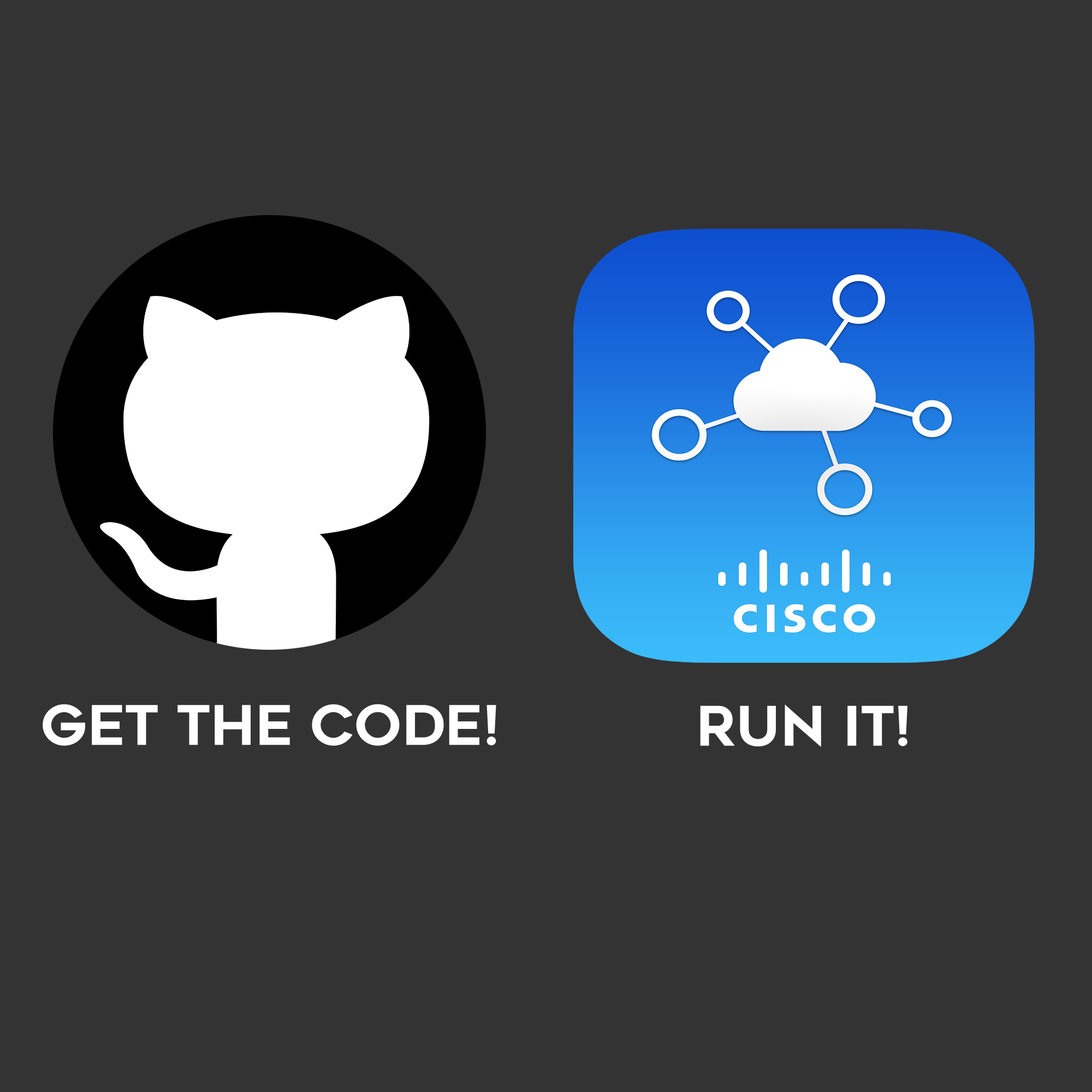
<style>
.page{position:relative;width:1092px;height:1092px;background:#333333}
.page>*{position:absolute;margin:0}
.t1{font:54.6px "Renogare-Regular";color:#ffffff}
</style>
<div class="page">
<p class="t1" style="left:43px;top:704px;width:453px;height:42px">GET THE CODE!</p>
<p class="t1" style="left:700px;top:704px;width:207px;height:43px">RUN IT!</p>
</div>
